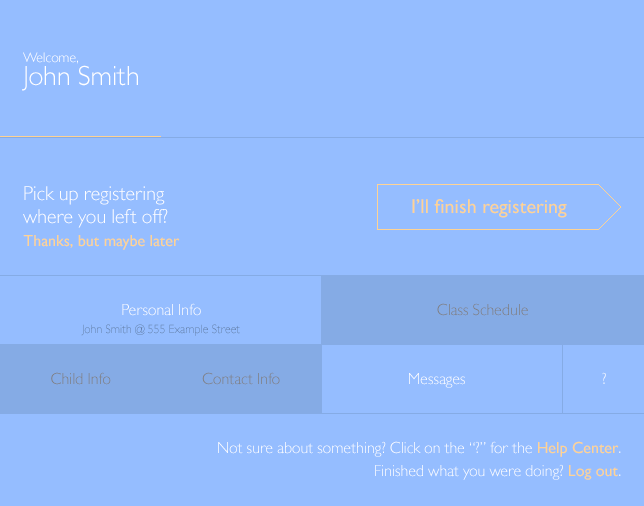
<style>
.page{position:relative;width:644px;height:506px;background:#95bdff}
.page>*{position:absolute;margin:0}
.t1{font:28px/23px "GillSansMTPro-Light";color:#ffffff}
.t2{font:14px/23px "GillSansMTPro-Light";color:#ffffff}
.t3{font:20px/23px "GillSansMTPro-Light";color:#ffffff}
.t4{font:20px "GillSansMTPro-Medium";color:#ffd394}
.t5{font:16px "GillSansMTPro-Medium";color:#ffd394}
.t6{font:16px "GillSansMTPro-Light";color:#ffffff}
.t7{font:16px "GillSansMTPro-Light";color:#7f7c7a}
.t8{font:16px/23px "GillSansMTPro-Light";color:#ffffff}
.t9{font:16px/23px "GillSansMTPro-Medium";color:#ffd394}
</style>
<div class="page">
<p class="t1" style="left:22px;top:52px;width:116px;height:39px"><span class="t2">Welcome,<br></span>John Smith</p>
<p class="t3" style="left:23px;top:186px;width:145px;height:42px">Pick up registering<br>where you left off?</p>
<p class="t4" style="left:412px;top:199px;width:155px;height:19px">I’ll finish registering</p>
<p class="t5" style="left:23px;top:235px;width:157px;height:15px">Thanks, but maybe later</p>
<p class="t6" style="left:122px;top:303px;width:79px;height:13px">Personal Info</p>
<p class="t7" style="left:437px;top:303px;width:91px;height:13px">Class Schedule</p>
<p class="t7" style="left:51px;top:372px;width:60px;height:13px">Child Info</p>
<p class="t7" style="left:202px;top:372px;width:78px;height:13px">Contact Info</p>
<p class="t6" style="left:409px;top:373px;width:56px;height:15px">Messages</p>
<p class="t6" style="left:602px;top:372px;width:4px;height:12px">?</p>
<p class="t8" style="left:218px;top:441px;width:403px;height:39px;text-align:right">Not sure about something? Click on the “?” for the <span class="t9">Help Center</span>.<br>Finished what you were doing? <span class="t9">Log out</span>.</p>
</div>
